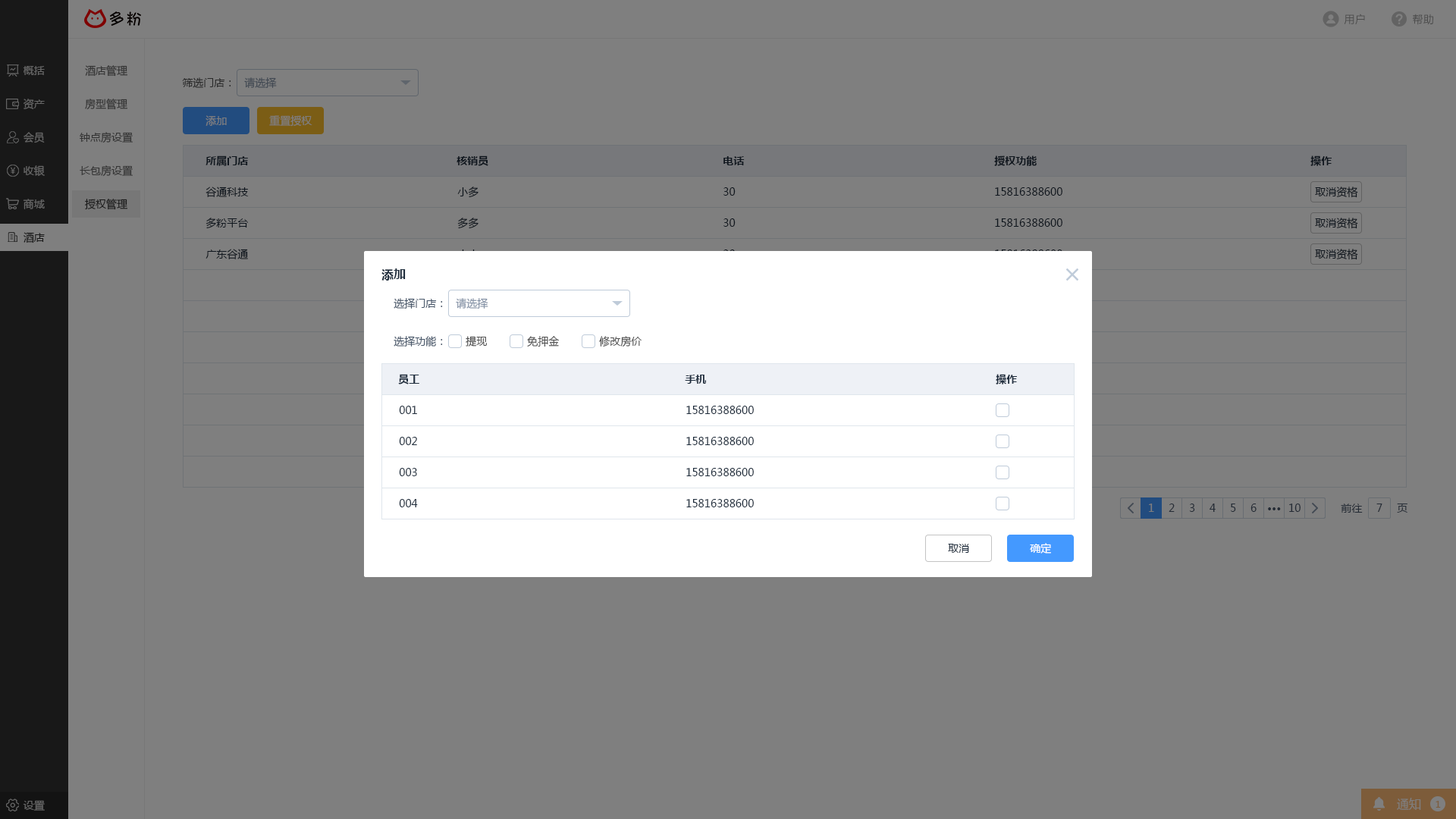
<style>
.page{position:relative;width:1456px;height:819px;background:#7f7f7f}
.page>*{position:absolute;margin:0}
.t1{font:10.6px "MicrosoftYaHei";letter-spacing:0.025em;color:#4c4c4c}
.t2{font:10.6px "MicrosoftYaHei";color:#666666}
.t3{font:10.6px "MicrosoftYaHei";color:#333333}
.t4{font:10.6px "MicrosoftYaHei";color:#282828}
.t5{font:10.6px "MicrosoftYaHei";color:#414852}
.t6{font:10.6px "MicrosoftYaHei";color:#7f7f7f}
.t7{font:10.6px "MicrosoftYaHei-Bold";color:#0f161e}
.t8{font:10.6px "MicrosoftYaHei";color:#0f161e}
.t9{font:10.6px "MicrosoftYaHei";color:#191919}
.t10{font:10.6px "MicrosoftYaHei";color:#1f2d3d}
.t11{font:10.6px "MicrosoftYaHei";color:#181818}
.t12{font:12.1px "MicrosoftYaHei-Bold";color:#1f2d3d}
.t13{font:10.6px "MicrosoftYaHei";color:#48576a}
.t14{font:10.6px "MicrosoftYaHei";color:#8391a5}
.t15{font:10.6px "MicrosoftYaHei";color:#505050}
.t16{font:10.6px "MicrosoftYaHei-Bold";color:#1f2d3d}
.t17{font:10.6px "MicrosoftYaHei";color:#242b35}
.t18{font:10.6px "MicrosoftYaHei-Bold";color:#242b35}
.t19{font:10.6px "MicrosoftYaHei";color:#ffffff}
.t20{font:12.1px "MicrosoftYaHei";color:#7f7f7f}
.t21{font:9.1px "MicrosoftYaHei";color:#7d5c3a}
</style>
<div class="page">
<p class="t1" style="left:1344px;top:14px;width:21px;height:11px">用户</p>
<p class="t1" style="left:1413px;top:14px;width:20px;height:11px">帮助</p>
<p class="t2" style="left:23px;top:66px;width:22px;height:9px">概括</p>
<p class="t3" style="left:85px;top:65px;width:42px;height:12px">酒店管理</p>
<p class="t4" style="left:182px;top:77px;width:49px;height:11px">筛选门店：</p>
<p class="t5" style="left:244px;top:77px;width:33px;height:11px">请选择</p>
<p class="t2" style="left:24px;top:99px;width:21px;height:10px">资产</p>
<p class="t3" style="left:85px;top:99px;width:42px;height:11px">房型管理</p>
<p class="t6" style="left:206px;top:115px;width:21px;height:11px">添加</p>
<p class="t6" style="left:269px;top:115px;width:43px;height:12px">重置授权</p>
<p class="t2" style="left:24px;top:132px;width:21px;height:11px">会员</p>
<p class="t3" style="left:80px;top:132px;width:53px;height:11px">钟点房设置</p>
<p class="t7" style="left:206px;top:155px;width:42px;height:11px">所属门店</p>
<p class="t7" style="left:457px;top:155px;width:31px;height:11px">核销员</p>
<p class="t7" style="left:723px;top:156px;width:22px;height:9px">电话</p>
<p class="t7" style="left:994px;top:155px;width:43px;height:11px">授权功能</p>
<p class="t7" style="left:1310px;top:155px;width:22px;height:11px">操作</p>
<p class="t2" style="left:24px;top:165px;width:21px;height:11px">收银</p>
<p class="t3" style="left:80px;top:165px;width:53px;height:12px">长包房设置</p>
<p class="t8" style="left:206px;top:187px;width:43px;height:10px">谷通科技</p>
<p class="t8" style="left:457px;top:187px;width:22px;height:11px">小多</p>
<p class="t8" style="left:723px;top:187px;width:13px;height:9px">30</p>
<p class="t8" style="left:995px;top:187px;width:67px;height:9px">15816388600</p>
<p class="t8" style="left:1315px;top:187px;width:43px;height:11px">取消资格</p>
<p class="t2" style="left:23px;top:199px;width:22px;height:10px">商城</p>
<p class="t9" style="left:85px;top:199px;width:42px;height:11px">授权管理</p>
<p class="t8" style="left:206px;top:218px;width:42px;height:11px">多粉平台</p>
<p class="t10" style="left:457px;top:218px;width:22px;height:11px">多多</p>
<p class="t8" style="left:723px;top:218px;width:13px;height:9px">30</p>
<p class="t8" style="left:995px;top:218px;width:67px;height:9px">15816388600</p>
<p class="t8" style="left:1315px;top:218px;width:43px;height:11px">取消资格</p>
<p class="t11" style="left:24px;top:232px;width:21px;height:11px">酒店</p>
<p class="t8" style="left:206px;top:249px;width:42px;height:10px">广东谷通</p>
<p class="t8" style="left:1315px;top:249px;width:43px;height:11px">取消资格</p>
<p class="t12" style="left:381px;top:268px;width:25px;height:13px">添加</p>
<p class="t13" style="left:394px;top:298px;width:49px;height:11px">选择门店：</p>
<p class="t14" style="left:456px;top:298px;width:32px;height:11px">请选择</p>
<p class="t13" style="left:394px;top:336px;width:49px;height:11px">选择功能：</p>
<p class="t15" style="left:466px;top:336px;width:21px;height:11px">提现</p>
<p class="t15" style="left:527px;top:336px;width:32px;height:11px">免押金</p>
<p class="t15" style="left:599px;top:336px;width:43px;height:11px">修改房价</p>
<p class="t16" style="left:398px;top:374px;width:21px;height:10px">员工</p>
<p class="t16" style="left:685px;top:375px;width:21px;height:9px">手机</p>
<p class="t16" style="left:996px;top:374px;width:21px;height:10px">操作</p>
<p class="t10" style="left:399px;top:406px;width:18px;height:8px">001</p>
<p class="t10" style="left:686px;top:406px;width:68px;height:8px">15816388600</p>
<p class="t10" style="left:399px;top:437px;width:18px;height:8px">002</p>
<p class="t10" style="left:686px;top:437px;width:68px;height:8px">15816388600</p>
<p class="t10" style="left:399px;top:468px;width:18px;height:8px">003</p>
<p class="t10" style="left:686px;top:468px;width:68px;height:8px">15816388600</p>
<p class="t10" style="left:399px;top:499px;width:19px;height:8px">004</p>
<p class="t10" style="left:686px;top:499px;width:68px;height:8px">15816388600</p>
<p class="t6" style="left:1149px;top:504px;width:5px;height:8px">1</p>
<p class="t17" style="left:1169px;top:504px;width:6px;height:8px">2</p>
<p class="t17" style="left:1189px;top:504px;width:6px;height:8px">3</p>
<p class="t17" style="left:1210px;top:504px;width:6px;height:8px">4</p>
<p class="t17" style="left:1231px;top:504px;width:5px;height:8px">5</p>
<p class="t17" style="left:1250px;top:504px;width:7px;height:8px">6</p>
<p class="t18" style="left:1268px;top:507px;width:13px;height:3px">···</p>
<p class="t17" style="left:1289px;top:504px;width:12px;height:8px">10</p>
<p class="t17" style="left:1341px;top:504px;width:22px;height:9px">前往</p>
<p class="t17" style="left:1376px;top:504px;width:6px;height:8px">7</p>
<p class="t17" style="left:1397px;top:504px;width:10px;height:9px">页</p>
<p class="t10" style="left:948px;top:544px;width:21px;height:9px">取消</p>
<p class="t19" style="left:1030px;top:543px;width:21px;height:11px">确定</p>
<p class="t20" style="left:1397px;top:798px;width:24px;height:12px">通知</p>
<p class="t2" style="left:23px;top:800px;width:22px;height:11px">设置</p>
<p class="t21" style="left:1436px;top:801px;width:5px;height:7px">1</p>
</div>
